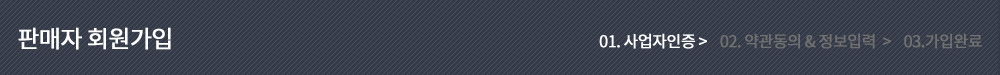
<style>
.page{position:relative;width:1000px;height:75px;background:#353a49}
.page>*{position:absolute;margin:0}
.t1{font:24px "NotoSansCJKkr-Regular";letter-spacing:-0.05em;color:#ffffff;font-weight:bold}
.t2{font:16px "NotoSansCJKkr-Regular";letter-spacing:-0.05em;color:#717171;font-weight:bold}
.t3{font:16px "NotoSansCJKkr-Regular";letter-spacing:-0.05em;color:#ffffff;font-weight:bold}
</style>
<div class="page">
<p class="t1" style="left:18px;top:27px;width:153px;height:23px">판매자 회원가입</p>
<p class="t2" style="left:599px;top:33px;width:383px;height:16px"><span class="t3">01. 사업자인증 &gt;    </span>02. 약관동의 &amp; 정보입력  &gt;    03.가입완료</p>
</div>
